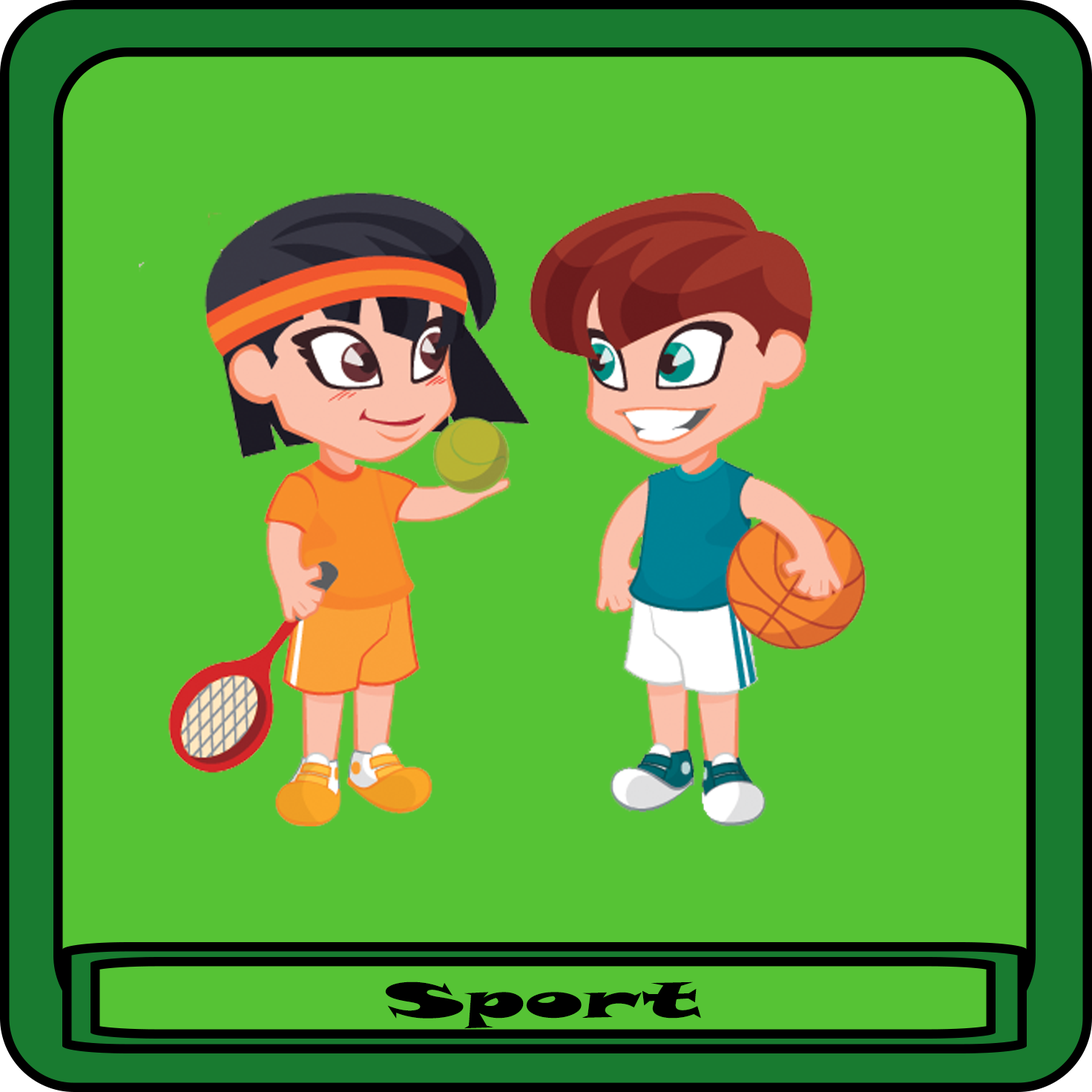
<style>
.page{position:relative;width:1092px;height:1092px;background:#56c335}
.page>*{position:absolute;margin:0}
.t1{font:48.2px "SnapITC-Regular";color:#000000;scale:2 1}
</style>
<div class="page">
<p class="t1" style="left:385px;top:981px;width:316px;height:48px">Sport</p>
</div>
